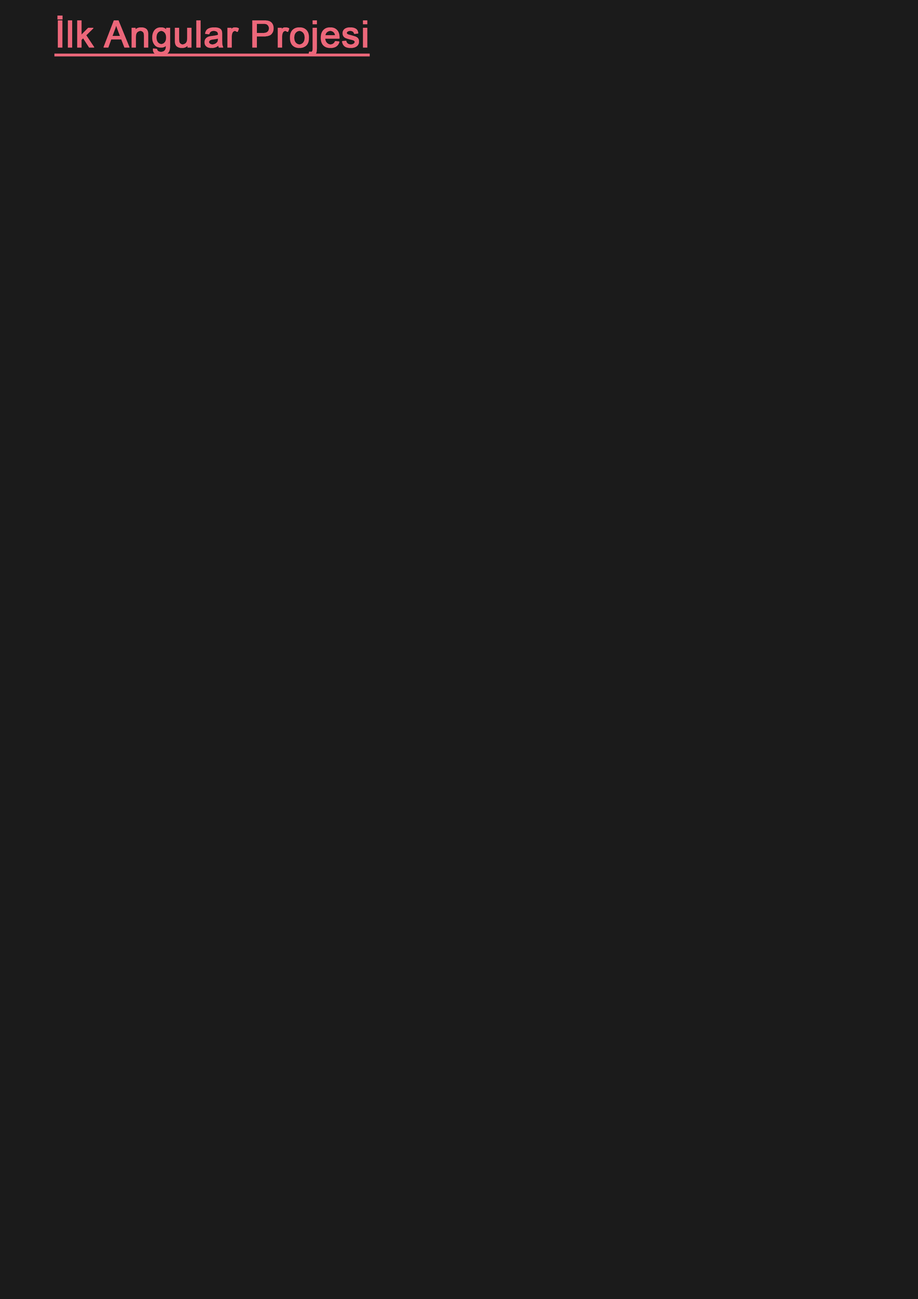
<style>
.page{position:relative;width:918px;height:1299px;background:#1b1b1b}
.page>*{position:absolute;margin:0}
.t1{font:37px "ArialMT";color:#ec677a;font-weight:bold;text-decoration:underline}
</style>
<div class="page">
<p class="t1" style="left:54px;top:16px;width:316px;height:41px">İlk Angular Projesi</p>
</div>
